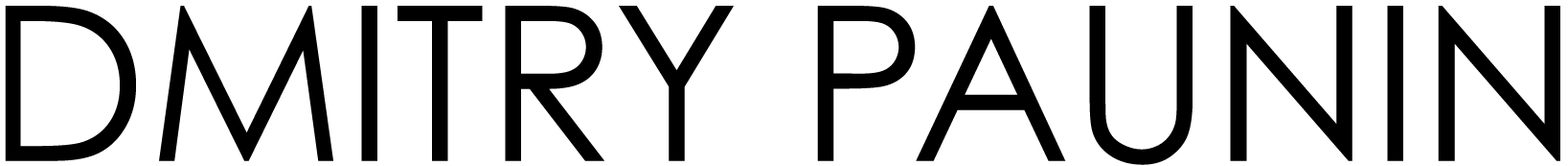
<style>
.page{position:relative;width:1568px;height:166px;background:#ffffff}
.page>*{position:absolute;margin:0}
.t1{font:215.5px "CenturyGothic";color:#000000}
</style>
<div class="page">
<p class="t1" style="left:5px;top:6px;width:1555px;height:159px">DMITRY PAUNIN</p>
</div>
